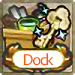
<style>
.page{position:relative;width:75px;height:75px}
.page>*{position:absolute;margin:0}
.t1{font:16px "AdobeClean-Regular";letter-spacing:-0.08em;color:#ff5a00}
</style>
<div class="page">
<p class="t1" style="left:23px;top:53px;width:31px;height:13px">Dock</p>
</div>
